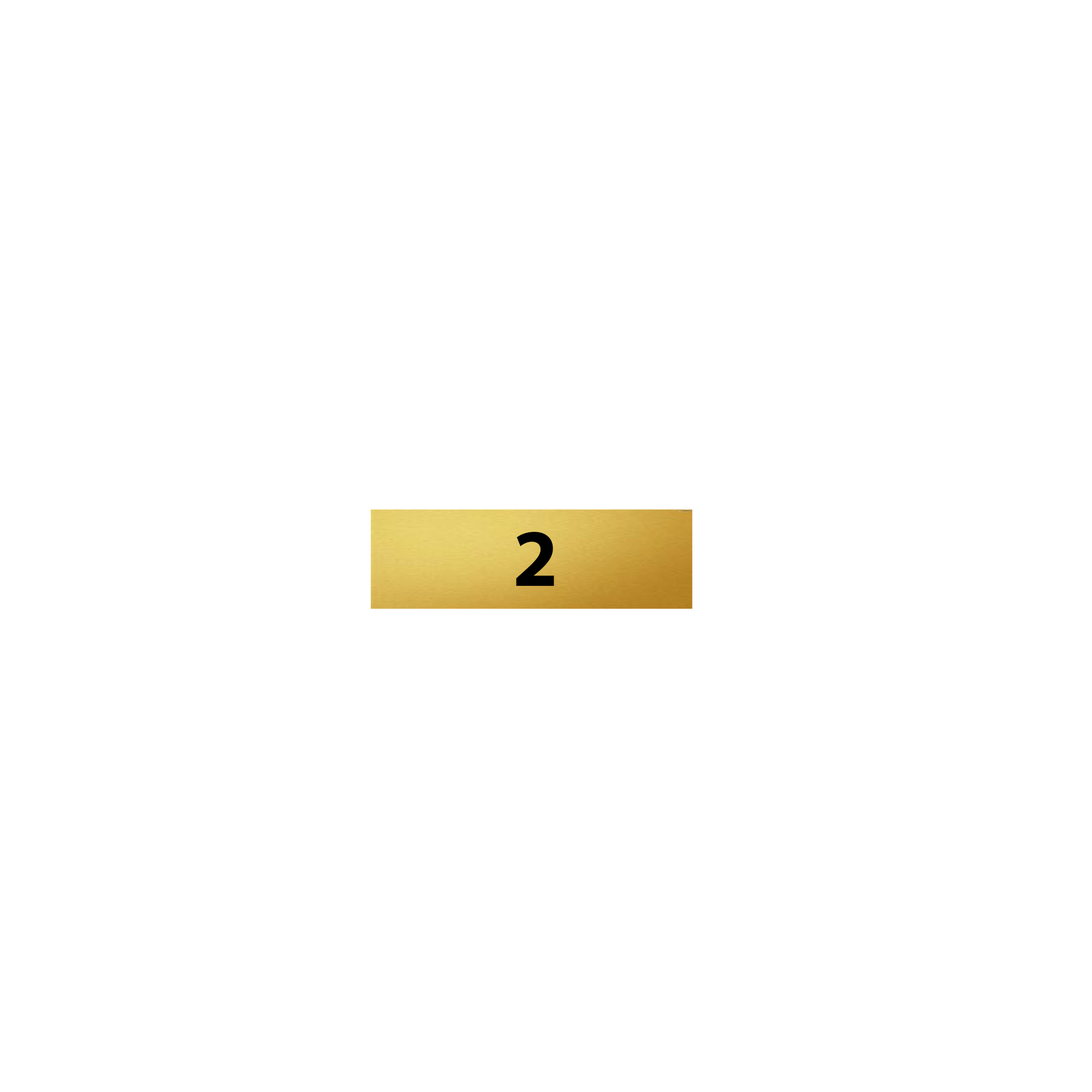
<style>
.page{position:relative;width:1092px;height:1092px;background:#ffffff}
.page>*{position:absolute;margin:0}
.t1{font:81.9px "MyriadPro-Bold";color:#000000}
</style>
<div class="page">
<p class="t1" style="left:516px;top:532px;width:38px;height:54px">2</p>
</div>
